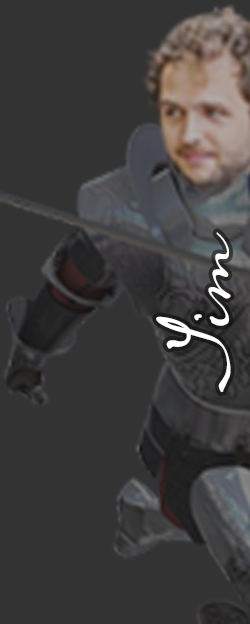
<style>
.page{position:relative;width:250px;height:624px;background:#333333}
.page>*{position:absolute;margin:0}
.t1{font:72px "MitreSquare";color:#ffffff}
</style>
<div class="page">
<p class="t1" style="left:156px;top:232px;width:75px;height:160px;rotate:-90deg">Tim</p>
</div>
